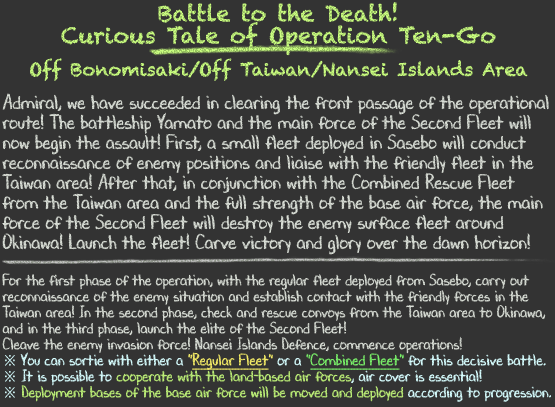
<style>
.page{position:relative;width:555px;height:407px;background:#333333}
.page>*{position:absolute;margin:0}
.t1{font:18px/36px "Chalkduster";color:#bcec77}
.t2{font:22px/22px "Chalkduster";color:#bcec77}
.t3{font:22px/36px "Chalkduster";color:#bcec77}
.t4{font:20px/20px "DJBChalkItUp";color:#d9ded6;scale:0.9 1}
.t5{font:16px/16px "DJBChalkItUp";color:#d9ded6;scale:0.9 1}
.t6{font:16px/16px "TimesNewRomanPSMT";color:#d7feff;scale:0.9 1}
.t7{font:16px/16px "DJBChalkItUp";color:#d7feff;scale:0.9 1}
.t8{font:16px/16px "DJBChalkItUp";color:#f5ed68;scale:0.9 1}
.t9{font:16px/16px "DJBChalkItUp";color:#f5ed68;text-decoration:underline;scale:0.9 1}
.t10{font:16px/16px "DJBChalkItUp";color:#7bf26b;scale:0.9 1}
.t11{font:16px/16px "DJBChalkItUp";color:#7bf26b;text-decoration:underline;scale:0.9 1}
.t12{font:16px/16px "DJBChalkItUp";color:#bdef78;scale:0.9 1}
</style>
<div class="page">
<p class="t1" style="left:30px;top:2px;width:498px;height:79px;text-align:center"><span class="t2">Battle to the Death!<br></span><span class="t3">Curious Tale of Operation Ten-Go<br></span>Off Bonomisaki/Off Taiwan/Nansei Islands Area</p>
<p class="t4" style="left:2px;top:93px;width:549px;height:309px">Admiral, we have succeeded in clearing the front passage of the operational<br>route! The battleship Yamato and the main force of the Second Fleet will<br>now begin the assault! First, a small fleet deployed in Sasebo will conduct<br>reconnaissance of enemy positions and liaise with the friendly fleet in the<br>Taiwan area! After that, in conjunction with the Combined Rescue Fleet <br>from the Taiwan area and the full strength of the base air force, the main<br>force of the Second Fleet will destroy the enemy surface fleet around<br>Okinawa! Launch the fleet! Carve victory and glory over the dawn horizon!<br><br><span class="t5">For the first phase of the operation, with the regular fleet deployed from Sasebo, carry out<br>reconnaissance of the enemy situation and establish contact with the friendly forces in the<br>Taiwan area! In the second phase, check and rescue convoys from the Taiwan area to Okinawa,<br>and in the third phase, launch the elite of the Second Fleet!<br>Cleave the enemy invasion force! Nansei Islands Defence, commence operations!<br></span><span class="t6">※ </span><span class="t7">You can sortie with either a </span><span class="t8">"</span><span class="t9">Regular Fleet</span><span class="t8">"</span><span class="t7"> or a </span><span class="t10">"</span><span class="t11">Combined Fleet</span><span class="t10">" </span><span class="t7">for this decisive battle.<br></span><span class="t6">※</span><span class="t7"> It is possible to </span><span class="t12">cooperate with the land-based air forces</span><span class="t7">, air cover is essential!<br></span><span class="t6">※ </span><span class="t12">Deployment bases of the base air force will be moved and deployed</span><span class="t7"> according to progression.</span></p>
</div>
